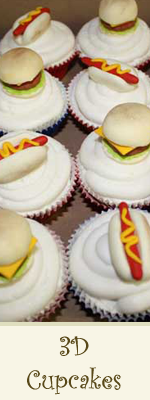
<style>
.page{position:relative;width:150px;height:400px}
.page>*{position:absolute;margin:0}
.t1{font:28px "CurlzMT";color:#584818}
</style>
<div class="page">
<p class="t1" style="left:27px;top:336px;width:94px;height:59px;text-align:center">3D<br>Cupcakes</p>
</div>
